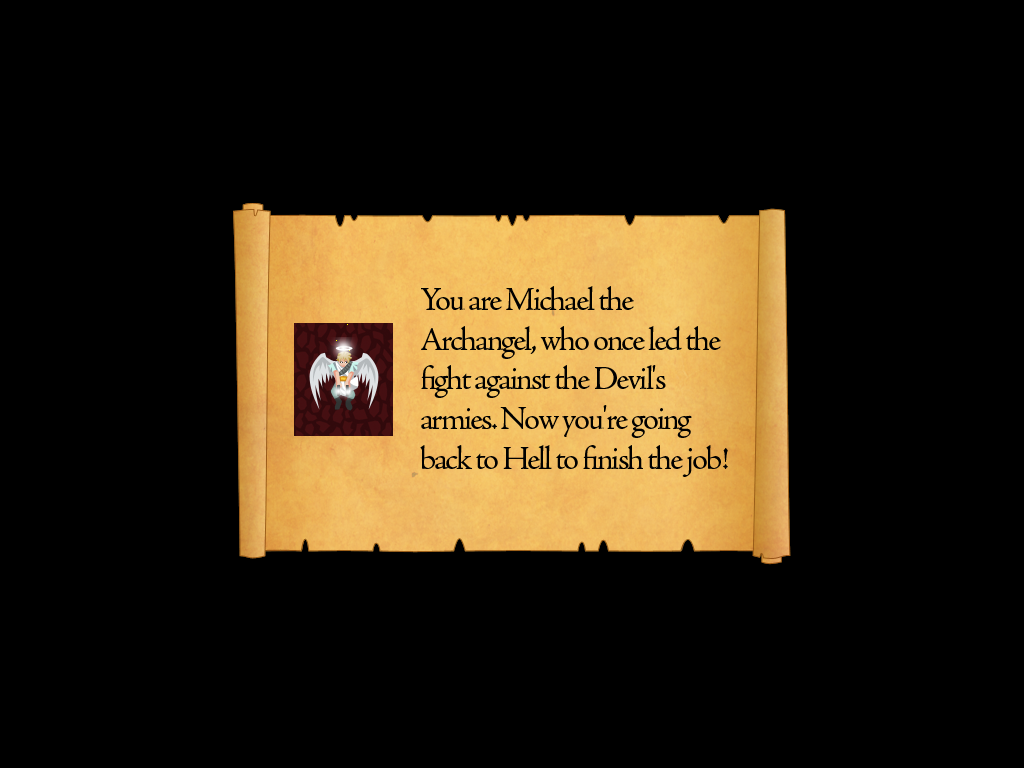
<style>
.page{position:relative;width:1024px;height:768px;background:#000000}
.page>*{position:absolute;margin:0}
.t1{font:33px "AJensonPro-Regular";letter-spacing:-0.06em;color:#000000}
</style>
<div class="page">
<p class="t1" style="left:420px;top:286px;width:308px;height:191px">You are Michael the Archangel, who once led the fight against the Devil's armies. Now you're going back to Hell to finish the job!</p>
</div>
